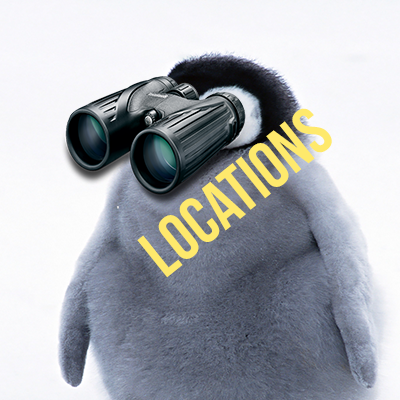
<style>
.page{position:relative;width:400px;height:400px}
.page>*{position:absolute;margin:0}
.t1{font:68px "BebasNeue";color:#fee96c}
</style>
<div class="page">
<p class="t1" style="left:137px;top:108px;width:195px;height:170px;rotate:-39deg">locations</p>
</div>
